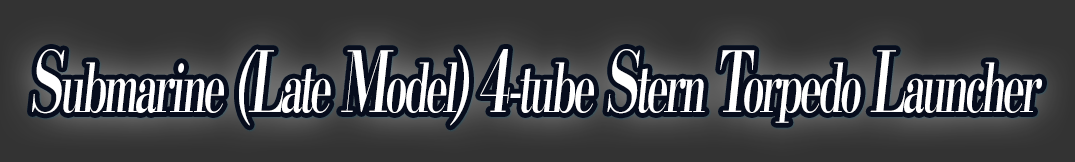
<style>
.page{position:relative;width:1075px;height:162px;background:#333333}
.page>*{position:absolute;margin:0}
.t1{font:67.2px "KochoStd-Heavy";letter-spacing:-0.08em;color:#ffffff;font-style:italic;scale:0.6 1}
.t2{font:84px "KochoStd-Heavy";letter-spacing:-0.08em;color:#ffffff;font-style:italic;scale:0.6 1}
</style>
<div class="page">
<p class="t1" style="left:32px;top:49px;width:1010px;height:77px"><span class="t2">S</span>ubmarine<span class="t2"> (L</span>ate<span class="t2"> M</span>odel<span class="t2">) 4</span>-tube<span class="t2"> S</span>tern<span class="t2"> T</span>orpedo<span class="t2"> L</span>auncher</p>
</div>
